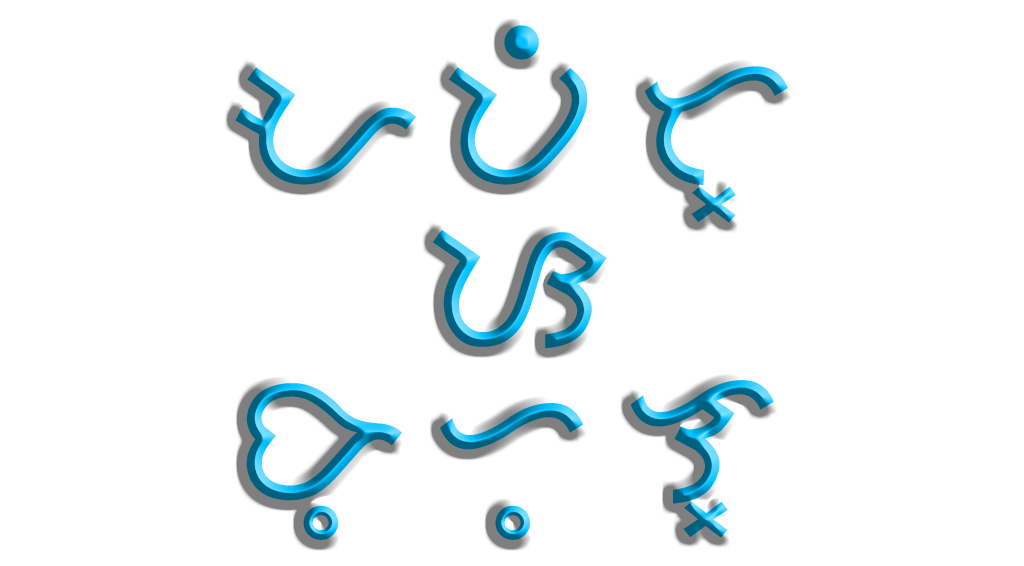
<style>
.page{position:relative;width:1024px;height:566px;background:#ffffff}
.page>*{position:absolute;margin:0}
.t1{font:192px "BaybayinModernClub"}
</style>
<div class="page">
<p class="t1" style="left:235px;top:25px;width:553px;height:198px">Awit=</p>
<p class="t1" style="left:433px;top:230px;width:174px;height:119px">s</p>
<p class="t1" style="left:246px;top:380px;width:528px;height:160px">bohol=</p>
</div>
